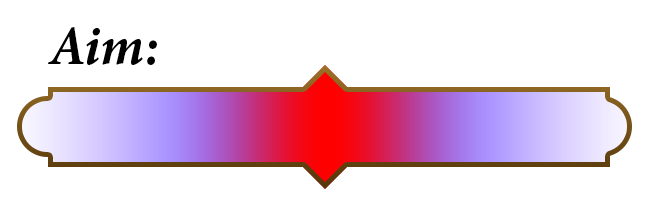
<style>
.page{position:relative;width:650px;height:200px;background:#ffffff}
.page>*{position:absolute;margin:0}
.t1{font:55px "MinionPro-BoldIt";color:#000000}
</style>
<div class="page">
<p class="t1" style="left:48px;top:27px;width:109px;height:38px">Aim:</p>
</div>
